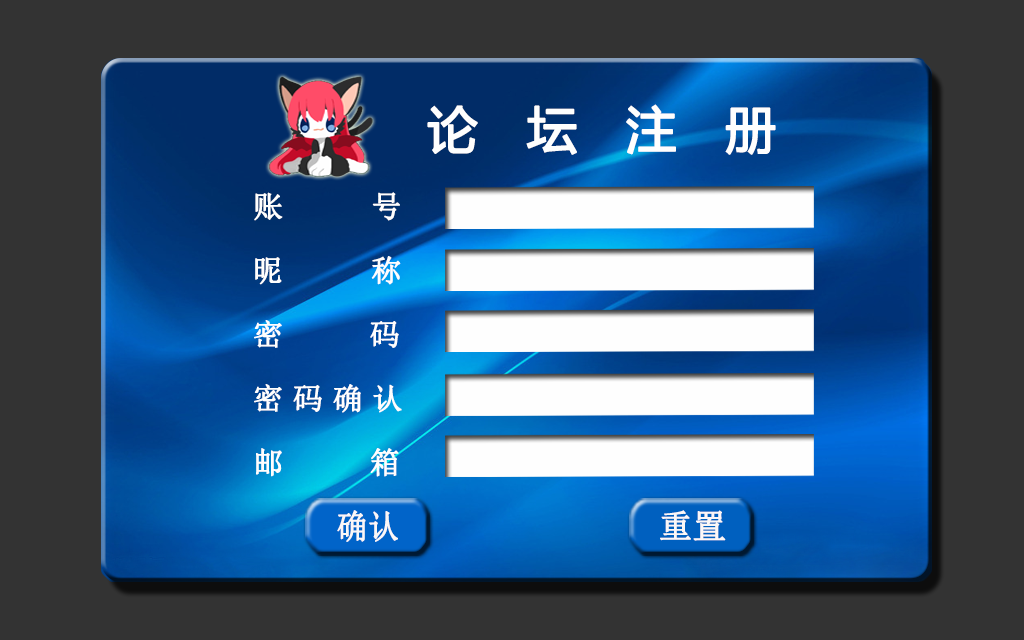
<style>
.page{position:relative;width:1024px;height:640px;background:#333333}
.page>*{position:absolute;margin:0}
.t1{font:50px "MicrosoftYaHei";letter-spacing:0.96em;color:#fefefe;font-weight:bold}
.t2{font:30px/64px "SimSun";letter-spacing:0.62em;color:#fefefe;font-weight:bold}
.t3{font:30px/64px "SimSun";letter-spacing:0.32em;color:#fefefe;font-weight:bold}
.t4{font:30px/64px "SimSun";letter-spacing:0.3em;color:#fefefe;font-weight:bold}
.t5{font:33.6px "SimSun";color:#fbf7f7;font-weight:bold;scale:0.92 1}
.t6{font:33px "SimSun";color:#fbf7f7;font-weight:bold}
</style>
<div class="page">
<p class="t1" style="left:427px;top:104px;width:349px;height:51px">论坛注册</p>
<p class="t2" style="left:254px;top:192px;width:148px;height:285px">账  号<br>昵  称<span class="t3"><br>密   码<br></span><span class="t4">密码确认</span><span class="t3"><br>邮   箱</span></p>
<p class="t5" style="left:337px;top:510px;width:61px;height:32px">确认</p>
<p class="t6" style="left:660px;top:510px;width:66px;height:31px">重置</p>
</div>
